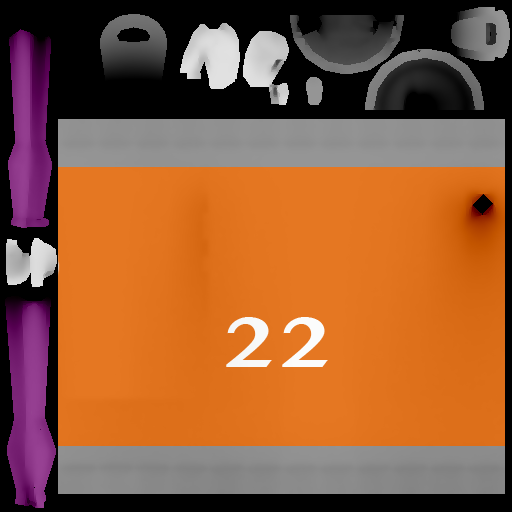
<style>
.page{position:relative;width:512px;height:512px;background:#000000}
.page>*{position:absolute;margin:0}
.t1{font:72px "LaoMN-Bold";color:#fbfcfc;scale:1.2 1}
</style>
<div class="page">
<p class="t1" style="left:226px;top:317px;width:102px;height:50px">22</p>
</div>
